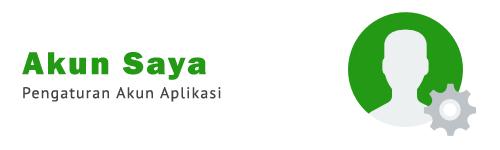
<style>
.page{position:relative;width:500px;height:150px;background:#ffffff}
.page>*{position:absolute;margin:0}
.t1{font:32.5px "FranklinGothic-Heavy";letter-spacing:0.075em;color:#239916;scale:1.04 1}
.t2{font:15.5px "PTSans-Regular";letter-spacing:0.075em;color:#444444}
</style>
<div class="page">
<p class="t1" style="left:22px;top:52px;width:184px;height:28px">Akun Saya</p>
<p class="t2" style="left:23px;top:87px;width:198px;height:15px">Pengaturan Akun Aplikasi</p>
</div>
